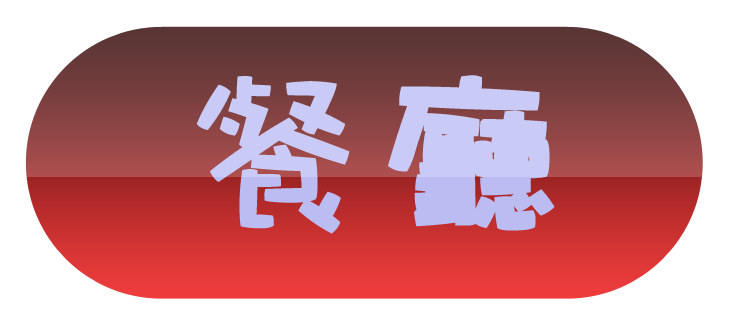
<style>
.page{position:relative;width:750px;height:330px;background:#ffffff}
.page>*{position:absolute;margin:0}
.t1{font:187.5px "DFWaWa-W7-WIN-BF";color:#bbbdf2;font-weight:bold}
</style>
<div class="page">
<p class="t1" style="left:196px;top:75px;width:359px;height:159px">餐廳</p>
</div>
